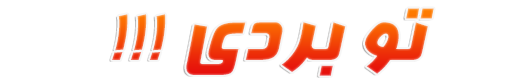
<style>
.page{position:relative;width:512px;height:83px;background:#ffffff}
.page>*{position:absolute;margin:0}
.t1{font:90px "BFarnaz"}
</style>
<div class="page">
<p class="t1" style="left:112px;top:8px;width:322px;height:68px">!!! تو بردی</p>
</div>
